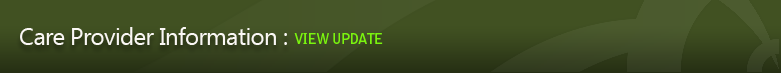
<style>
.page{position:relative;width:781px;height:73px;background:#415122}
.page>*{position:absolute;margin:0}
.t1{font:24px "SegoeUI";letter-spacing:-0.025em;color:#faf7f5}
.t2{font:14px "BellGothicStd-Bold";letter-spacing:-0.05em;color:#7af40e}
</style>
<div class="page">
<p class="t1" style="left:20px;top:27px;width:267px;height:18px">Care Provider Information :</p>
<p class="t2" style="left:294px;top:33px;width:89px;height:11px">VIEW UPDATE</p>
</div>
